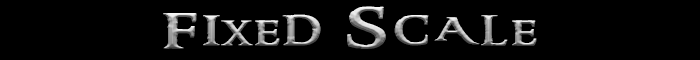
<style>
.page{position:relative;width:700px;height:60px;background:#000000}
.page>*{position:absolute;margin:0}
.t1{font:40.8px "RingbearerMedium";letter-spacing:0.075em;font-variant:small-caps;font-weight:bold;scale:1.67 1}
</style>
<div class="page">
<p class="t1" style="left:163px;top:6px;width:374px;height:43px">Fixed Scale</p>
<p class="t1" style="left:163px;top:6px;width:374px;height:43px">Fixed Scale</p>
</div>
